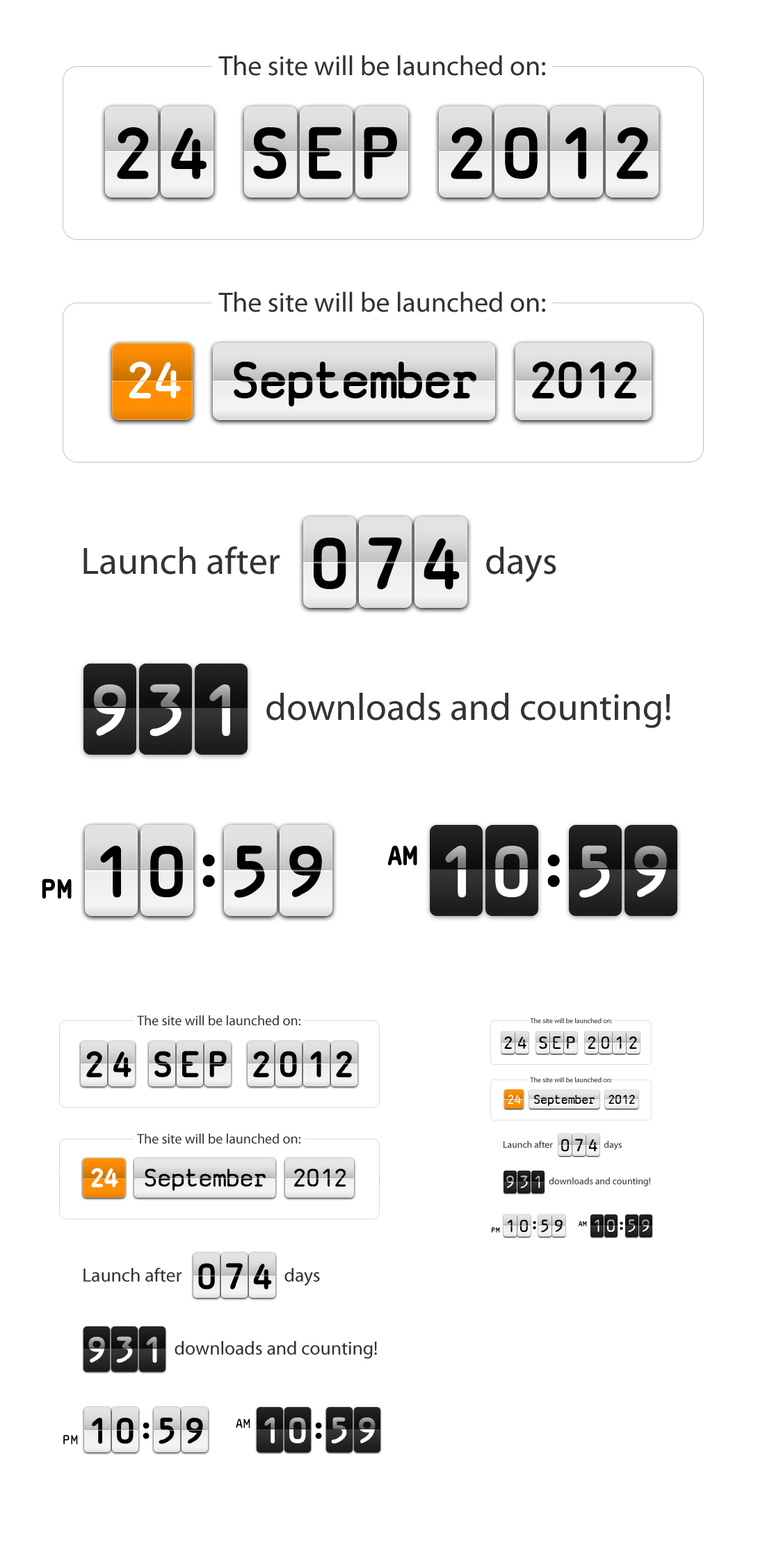
<style>
.page{position:relative;width:765px;height:1558px;background:#ffffff}
.page>*{position:absolute;margin:0}
.t1{font:27.8px "MyriadPro-Regular";color:#333333}
.t2{font:75.1px "SVBasicManual";letter-spacing:0.23em;color:#000000}
.t3{font:54.3px "SVBasicManual";color:#ffffff}
.t4{font:54.3px "SVBasicManual";color:#000000}
.t5{font:38.3px "MyriadPro-Regular";color:#333333}
.t6{font:75.1px "SVBasicManual";letter-spacing:0.23em}
.t7{font:27.8px "SVBasicManual";letter-spacing:0.05em;color:#000000}
.t8{font:13.9px "MyriadPro-Regular";color:#333333}
.t9{font:7px "MyriadPro-Regular";color:#333333}
.t10{font:18.8px "SVBasicManual";letter-spacing:0.23em;color:#000000}
.t11{font:37.6px "SVBasicManual";letter-spacing:0.23em;color:#000000}
.t12{font:13.6px "SVBasicManual";color:#ffffff}
.t13{font:13.6px "SVBasicManual";color:#000000}
.t14{font:9.6px "MyriadPro-Regular";color:#333333}
.t15{font:27.1px "SVBasicManual";color:#ffffff}
.t16{font:27.1px "SVBasicManual";color:#000000}
.t17{font:18.8px "SVBasicManual";letter-spacing:0.23em}
.t18{font:7.7px "SVBasicManual";letter-spacing:0.05em;color:#000000}
.t19{font:19.1px "MyriadPro-Regular";color:#333333}
.t20{font:37.6px "SVBasicManual";letter-spacing:0.23em}
.t21{font:13.9px "SVBasicManual";letter-spacing:0.05em;color:#000000}
</style>
<div class="page">
<p class="t1" style="left:218px;top:55px;width:327px;height:21px">The site will be launched on:</p>
<p class="t2" style="left:118px;top:128px;width:87px;height:50px">24</p>
<p class="t2" style="left:255px;top:128px;width:141px;height:50px">SEP</p>
<p class="t2" style="left:452px;top:128px;width:195px;height:50px">2012</p>
<p class="t1" style="left:218px;top:291px;width:327px;height:21px">The site will be launched on:</p>
<p class="t3" style="left:129px;top:362px;width:51px;height:36px">24</p>
<p class="t4" style="left:234px;top:362px;width:242px;height:44px">September</p>
<p class="t4" style="left:533px;top:362px;width:103px;height:36px">2012</p>
<p class="t2" style="left:315px;top:538px;width:143px;height:51px">074</p>
<p class="t5" style="left:83px;top:546px;width:197px;height:29px">Launch after</p>
<p class="t5" style="left:486px;top:547px;width:71px;height:35px">days</p>
<p class="t6" style="left:95px;top:685px;width:134px;height:50px">931</p>
<p class="t5" style="left:266px;top:693px;width:405px;height:35px">downloads and counting!</p>
<p class="t7" style="left:389px;top:846px;width:28px;height:19px">AM</p>
<p class="t2" style="left:102px;top:847px;width:80px;height:50px">10</p>
<p class="t2" style="left:202px;top:854px;width:13px;height:34px">:</p>
<p class="t2" style="left:236px;top:847px;width:85px;height:50px">59</p>
<p class="t6" style="left:447px;top:847px;width:80px;height:50px">10</p>
<p class="t2" style="left:547px;top:854px;width:13px;height:34px">:</p>
<p class="t6" style="left:581px;top:847px;width:85px;height:50px">59</p>
<p class="t7" style="left:42px;top:879px;width:29px;height:19px">PM</p>
<p class="t8" style="left:137px;top:1015px;width:164px;height:11px">The site will be launched on:</p>
<p class="t9" style="left:530px;top:1018px;width:82px;height:5px">The site will be launched on:</p>
<p class="t10" style="left:504px;top:1037px;width:23px;height:12px">24</p>
<p class="t10" style="left:539px;top:1037px;width:36px;height:12px">SEP</p>
<p class="t10" style="left:588px;top:1037px;width:49px;height:12px">2012</p>
<p class="t11" style="left:87px;top:1052px;width:44px;height:25px">24</p>
<p class="t11" style="left:155px;top:1052px;width:71px;height:25px">SEP</p>
<p class="t11" style="left:254px;top:1052px;width:97px;height:25px">2012</p>
<p class="t9" style="left:530px;top:1077px;width:82px;height:5px">The site will be launched on:</p>
<p class="t12" style="left:508px;top:1095px;width:13px;height:9px">24</p>
<p class="t13" style="left:534px;top:1095px;width:61px;height:11px">September</p>
<p class="t13" style="left:609px;top:1095px;width:26px;height:9px">2012</p>
<p class="t8" style="left:137px;top:1133px;width:164px;height:11px">The site will be launched on:</p>
<p class="t14" style="left:504px;top:1141px;width:49px;height:8px">Launch after</p>
<p class="t10" style="left:561px;top:1139px;width:37px;height:13px">074</p>
<p class="t14" style="left:604px;top:1141px;width:18px;height:10px">days</p>
<p class="t15" style="left:92px;top:1169px;width:26px;height:18px">24</p>
<p class="t16" style="left:145px;top:1169px;width:121px;height:22px">September</p>
<p class="t16" style="left:294px;top:1169px;width:52px;height:18px">2012</p>
<p class="t17" style="left:506px;top:1176px;width:35px;height:13px">931</p>
<p class="t14" style="left:549px;top:1177px;width:101px;height:10px">downloads and counting!</p>
<p class="t18" style="left:492px;top:1227px;width:8px;height:6px">PM</p>
<p class="t10" style="left:508px;top:1219px;width:20px;height:14px">10</p>
<p class="t10" style="left:533px;top:1221px;width:3px;height:9px">:</p>
<p class="t10" style="left:541px;top:1219px;width:22px;height:14px">59</p>
<p class="t18" style="left:579px;top:1221px;width:8px;height:5px">AM</p>
<p class="t17" style="left:595px;top:1219px;width:20px;height:14px">10</p>
<p class="t10" style="left:620px;top:1222px;width:3px;height:9px">:</p>
<p class="t17" style="left:628px;top:1219px;width:22px;height:14px">59</p>
<p class="t11" style="left:199px;top:1264px;width:72px;height:25px">074</p>
<p class="t19" style="left:83px;top:1267px;width:99px;height:15px">Launch after</p>
<p class="t19" style="left:285px;top:1268px;width:35px;height:18px">days</p>
<p class="t20" style="left:89px;top:1337px;width:68px;height:26px">931</p>
<p class="t19" style="left:175px;top:1341px;width:202px;height:18px">downloads and counting!</p>
<p class="t11" style="left:93px;top:1418px;width:40px;height:25px">10</p>
<p class="t11" style="left:159px;top:1418px;width:43px;height:25px">59</p>
<p class="t21" style="left:236px;top:1418px;width:14px;height:10px">AM</p>
<p class="t20" style="left:265px;top:1418px;width:40px;height:25px">10</p>
<p class="t20" style="left:332px;top:1418px;width:43px;height:25px">59</p>
<p class="t11" style="left:143px;top:1423px;width:7px;height:16px">:</p>
<p class="t11" style="left:315px;top:1423px;width:7px;height:16px">:</p>
<p class="t21" style="left:63px;top:1435px;width:15px;height:10px">PM</p>
</div>
